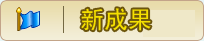
<style>
.page{position:relative;width:204px;height:41px}
.page>*{position:absolute;margin:0}
.t1{font:24px "SimHei";color:#f5e000}
</style>
<div class="page">
<p class="t1" style="left:81px;top:8px;width:70px;height:23px">新成果</p>
</div>
